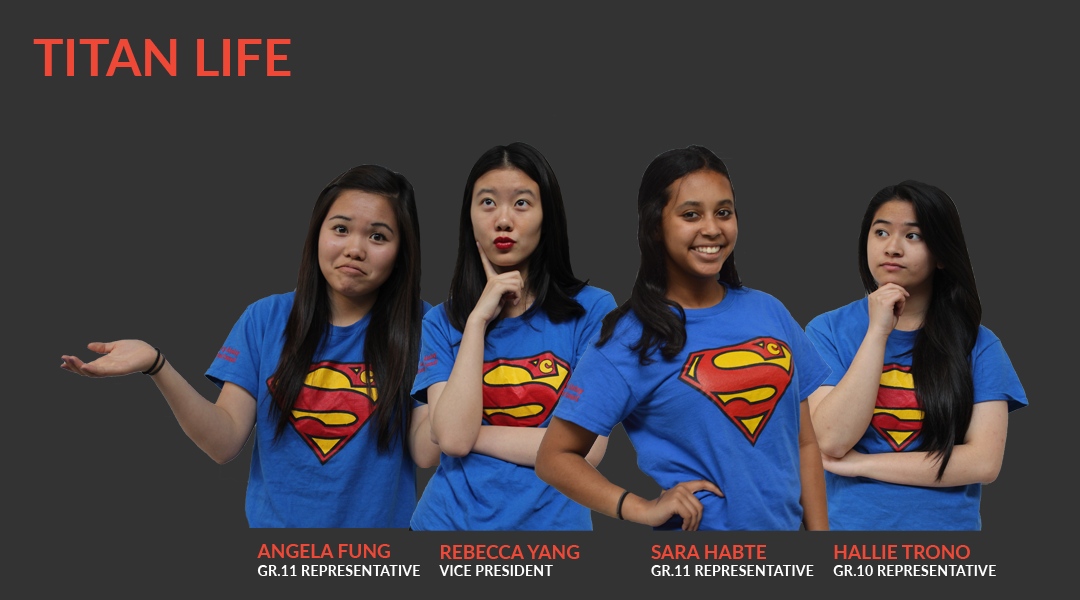
<style>
.page{position:relative;width:1080px;height:600px;background:#333333}
.page>*{position:absolute;margin:0}
.t1{font:51px "Lato-Bold";color:#ef4836}
.t2{font:14.4px "Lato-Bold";color:#ffffff}
.t3{font:19px "Lato-Bold";color:#ef4836}
</style>
<div class="page">
<p class="t1" style="left:33px;top:39px;width:258px;height:37px">TITAN LIFE</p>
<p class="t2" style="left:257px;top:544px;width:163px;height:32px"><span class="t3">ANGELA FUNG<br></span>GR.11 REPRESENTATIVE</p>
<p class="t2" style="left:439px;top:545px;width:141px;height:31px"><span class="t3">REBECCA YANG<br></span>VICE PRESIDENT</p>
<p class="t2" style="left:651px;top:545px;width:163px;height:31px"><span class="t3">SARA HABTE<br></span>GR.11 REPRESENTATIVE</p>
<p class="t2" style="left:833px;top:545px;width:163px;height:31px"><span class="t3">HALLIE TRONO<br></span>GR.10 REPRESENTATIVE</p>
</div>
